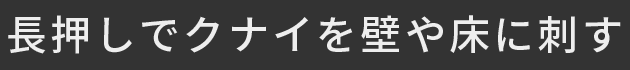
<style>
.page{position:relative;width:630px;height:70px;background:#333333}
.page>*{position:absolute;margin:0}
.t1{font:41px "SourceHanSansJP-Medium";letter-spacing:0.08em;color:#eeeeee}
</style>
<div class="page">
<p class="t1" style="left:8px;top:15px;width:613px;height:39px">長押しでクナイを壁や床に刺す</p>
</div>
